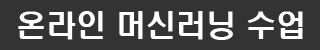
<style>
.page{position:relative;width:320px;height:50px;background:#333333}
.page>*{position:absolute;margin:0}
.t1{font:30px "H2hdrM";color:#ffffff}
</style>
<div class="page">
<p class="t1" style="left:18px;top:11px;width:285px;height:29px">온라인 머신러닝 수업</p>
</div>
